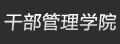
<style>
.page{position:relative;width:120px;height:44px;background:#2d2e2f}
.page>*{position:absolute;margin:0}
.t1{font:18px "MicrosoftYaHei";letter-spacing:0.05em;color:#e9e9e9}
</style>
<div class="page">
<p class="t1" style="left:4px;top:13px;width:113px;height:18px">干部管理学院</p>
</div>
